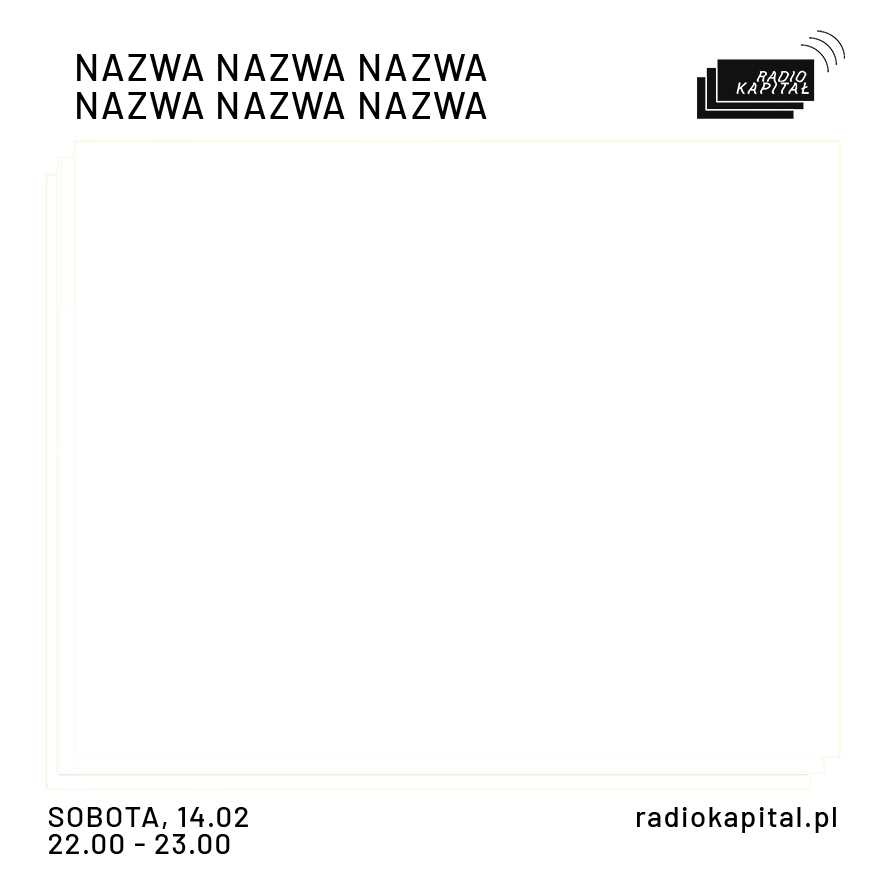
<style>
.page{position:relative;width:886px;height:886px;background:#ffffff}
.page>*{position:absolute;margin:0}
.t1{font:37.5px/37.5px "Barlow-Medium";letter-spacing:0.05em;color:#000000;text-transform:uppercase}
.t2{font:29.2px/27.1px "Barlow-Medium";letter-spacing:0.05em;color:#000000;text-transform:uppercase}
.t3{font:29.2px "Barlow-Medium";letter-spacing:0.05em;color:#000000}
</style>
<div class="page">
<p class="t1" style="left:77px;top:54px;width:410px;height:65px">NAZWA NAZWA NAZWA<br>NAZWA NAZWA NAZWA</p>
<p class="t2" style="left:48px;top:807px;width:200px;height:47px">sobota, 14.02 <br>22.00 - 23.00</p>
<p class="t3" style="left:637px;top:807px;width:199px;height:26px">radiokapital.pl</p>
</div>
